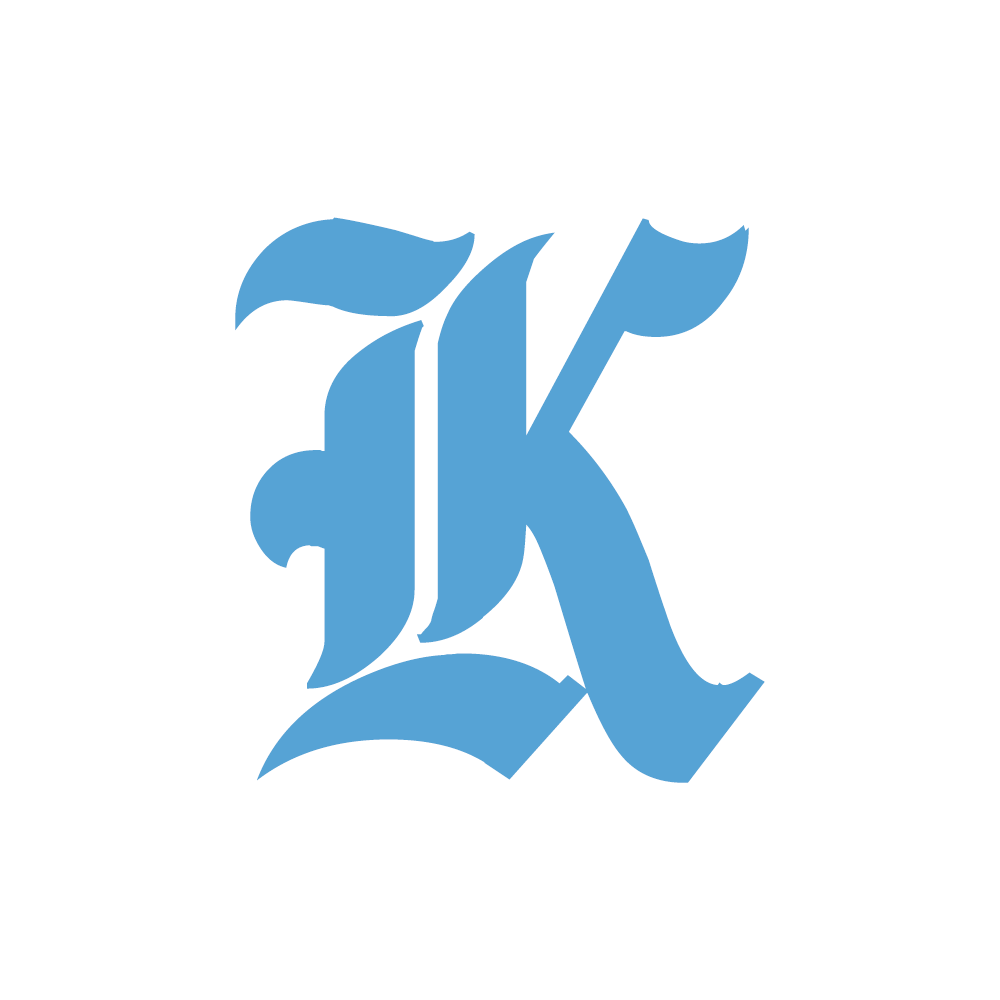
<style>
.page{position:relative;width:1000px;height:1000px;background:#ffffff}
.page>*{position:absolute;margin:0}
.t1{font:833.3px "EnglishTowne-Medium";color:#56a3d5}
</style>
<div class="page">
<p class="t1" style="left:235px;top:217px;width:530px;height:566px">K</p>
</div>
